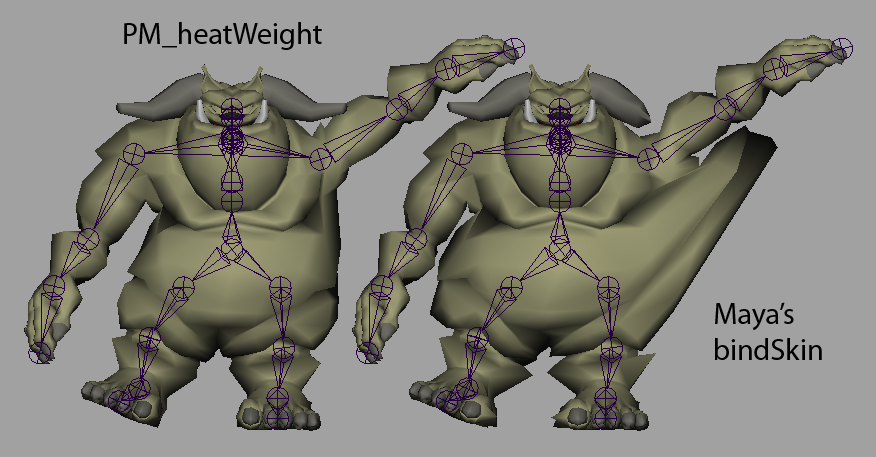
<style>
.page{position:relative;width:876px;height:457px;background:#a1a1a1}
.page>*{position:absolute;margin:0}
.t1{font:30px "MyriadPro-Regular";color:#000000}
</style>
<div class="page">
<p class="t1" style="left:124px;top:22px;width:198px;height:28px">PM_heatWeight</p>
<p class="t1" style="left:715px;top:302px;width:107px;height:58px">Maya’s<br>bindSkin</p>
</div>
